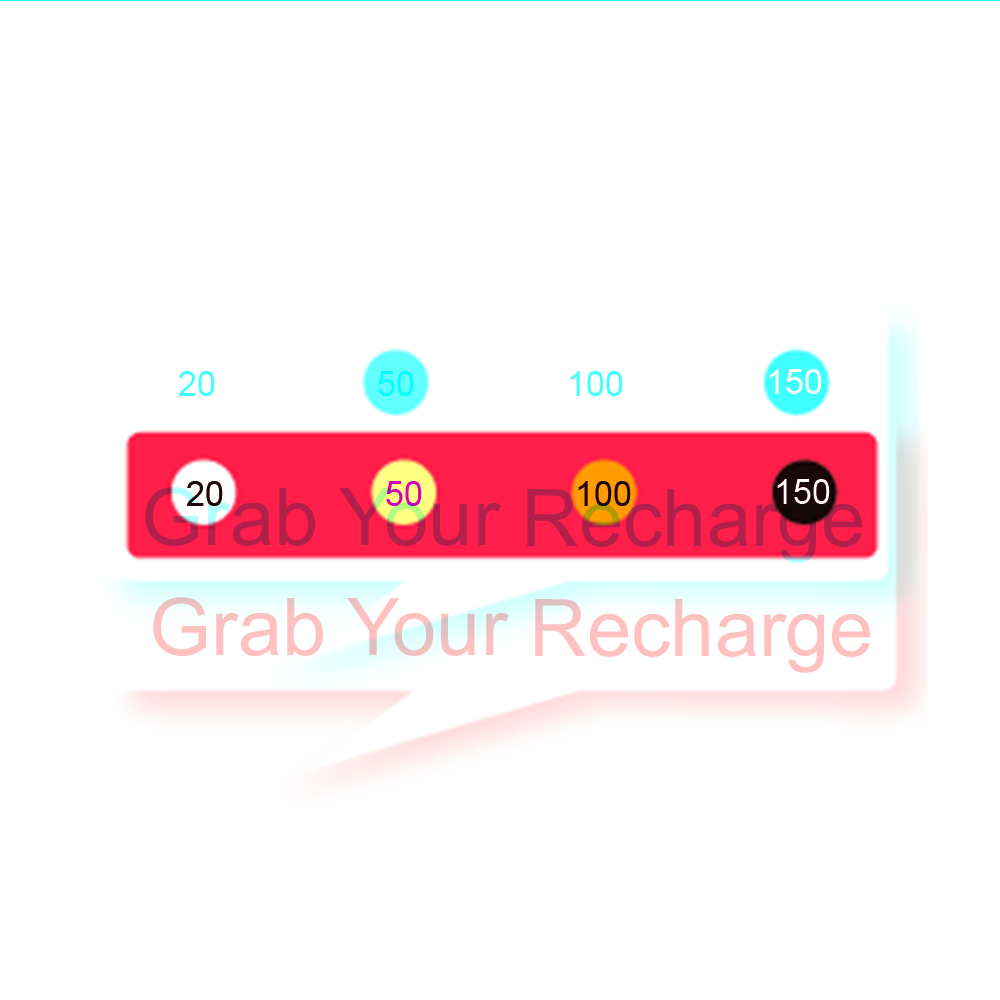
<style>
.page{position:relative;width:1000px;height:1000px;background:#ffffff}
.page>*{position:absolute;margin:0}
.t1{font:34.4px "ArialMT";color:#40ffff}
.t2{font:34.4px "ArialMT";color:#00ffff}
.t3{font:34.4px "ArialMT";color:#ffffff}
.t4{font:79.5px "ArialMT";color:#b11f4a}
</style>
<div class="page">
<p class="t1" style="left:179px;top:370px;width:36px;height:25px">20</p>
<p class="t2" style="left:378px;top:370px;width:36px;height:25px">50</p>
<p class="t1" style="left:570px;top:370px;width:53px;height:25px">100</p>
<p class="t3" style="left:769px;top:368px;width:53px;height:25px">150</p>
<p class="t4" style="left:145px;top:486px;width:717px;height:76px">Grab Your Recharge</p>
</div>
